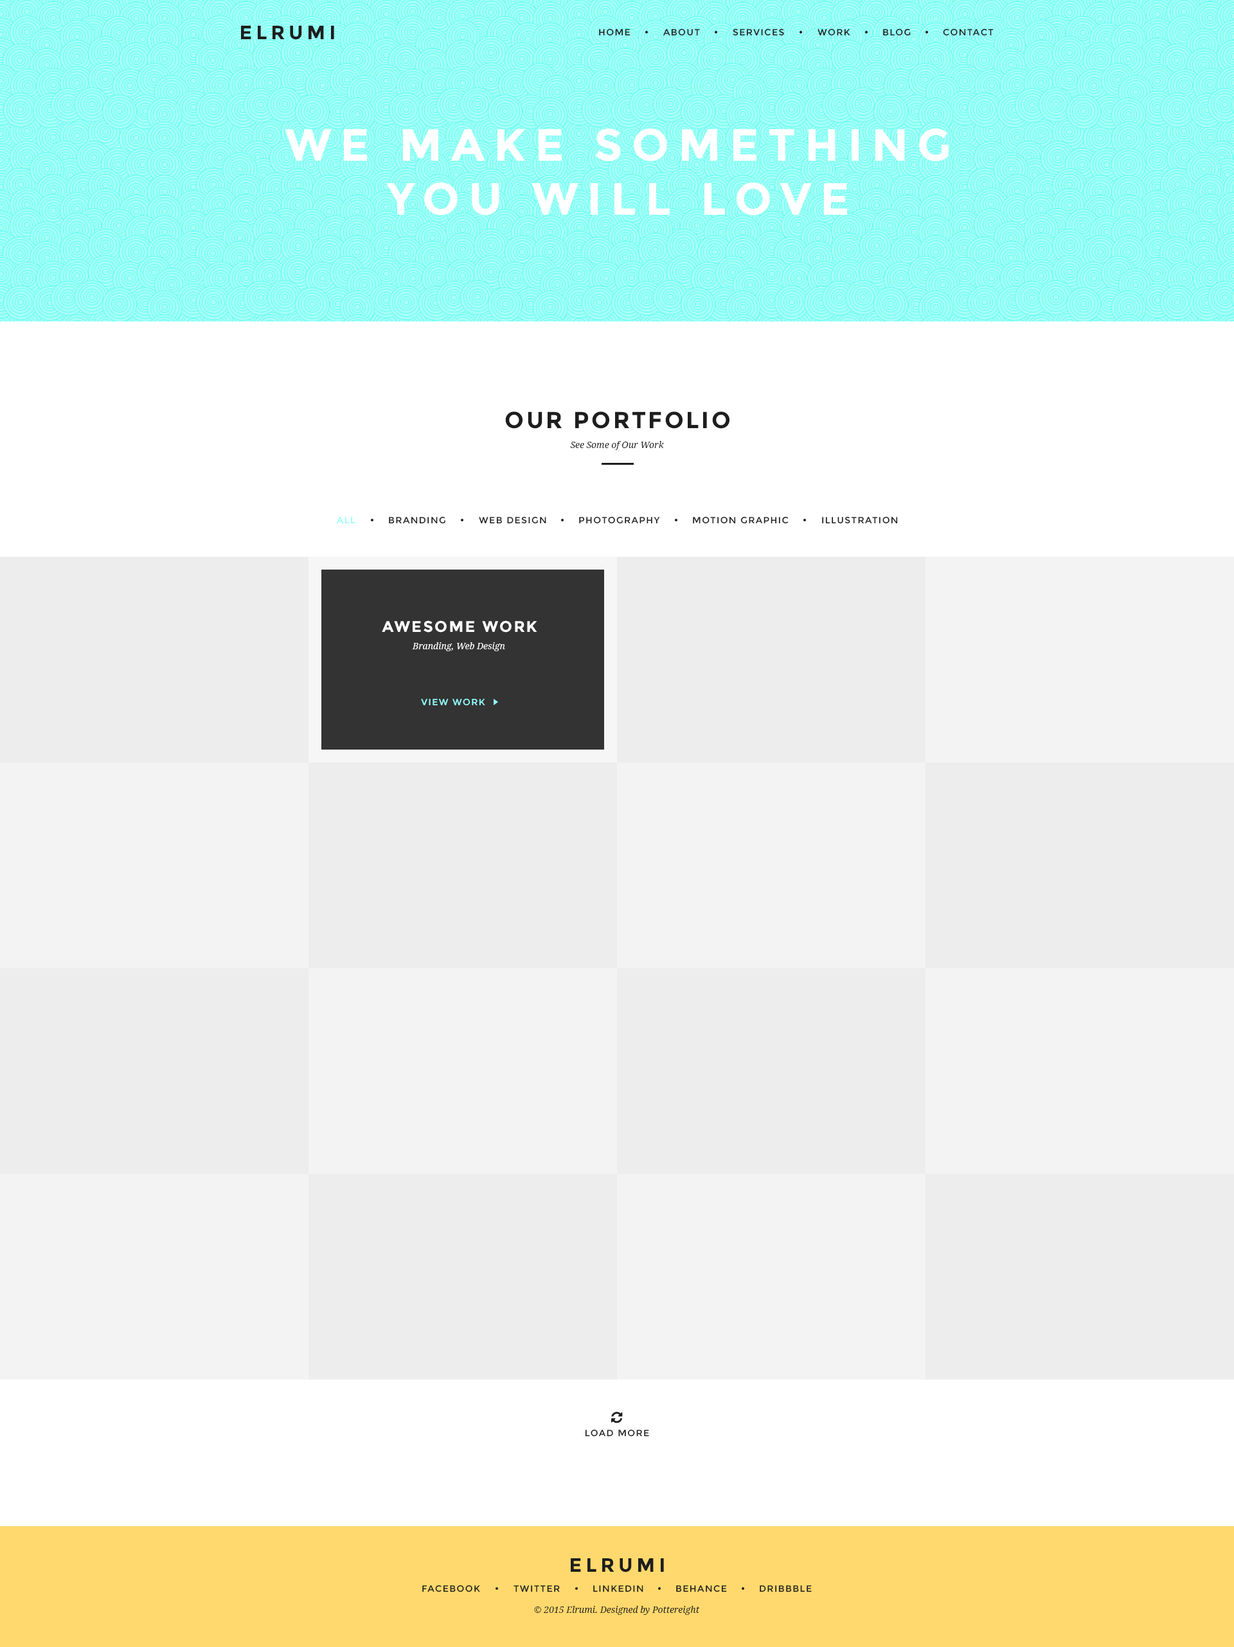
<style>
.page{position:relative;width:1234px;height:1647px;background:#ededed}
.page>*{position:absolute;margin:0}
.t1{font:19.3px "Montserrat-Bold";letter-spacing:0.2em;color:#1e1e1e}
.t2{font:9px "Montserrat-Regular";letter-spacing:0.1em;color:#1e1e1e}
.t3{font:45px "Montserrat-Bold";letter-spacing:0.2em;color:#ffffff}
.t4{font:23.1px "Montserrat-Bold";letter-spacing:0.1em;color:#1e1e1e}
.t5{font:9px "DroidSerif-Italic";color:#1e1e1e}
.t6{font:9px "Montserrat-Regular";letter-spacing:0.1em;color:#92fcf9}
.t7{font:15.4px "Montserrat-Bold";letter-spacing:0.1em;color:#ffffff}
.t8{font:9px "DroidSerif-Italic";color:#ffffff}
</style>
<div class="page">
<p class="t1" style="left:241px;top:26px;width:93px;height:14px">ELRUMI</p>
<p class="t2" style="left:599px;top:28px;width:32px;height:8px">HOME</p>
<p class="t2" style="left:663px;top:28px;width:37px;height:8px">ABOUT</p>
<p class="t2" style="left:733px;top:28px;width:51px;height:8px">SERVICES</p>
<p class="t2" style="left:818px;top:28px;width:33px;height:8px">WORK</p>
<p class="t2" style="left:883px;top:28px;width:28px;height:8px">BLOG</p>
<p class="t2" style="left:943px;top:28px;width:51px;height:8px">CONTACT</p>
<p class="t3" style="left:285px;top:129px;width:664px;height:86px;text-align:center">WE MAKE SOMETHING<br>YOU WILL LOVE</p>
<p class="t4" style="left:505px;top:411px;width:225px;height:18px">OUR PORTFOLIO</p>
<p class="t5" style="left:570px;top:441px;width:95px;height:9px">See Some of Our Work</p>
<p class="t6" style="left:337px;top:517px;width:19px;height:7px">ALL</p>
<p class="t2" style="left:389px;top:516px;width:57px;height:8px">BRANDING</p>
<p class="t2" style="left:479px;top:516px;width:67px;height:8px">WEB DESIGN</p>
<p class="t2" style="left:579px;top:516px;width:81px;height:8px">PHOTOGRAPHY</p>
<p class="t2" style="left:693px;top:516px;width:96px;height:8px">MOTION GRAPHIC</p>
<p class="t2" style="left:822px;top:516px;width:76px;height:8px">ILLUSTRATION</p>
<p class="t7" style="left:382px;top:620px;width:155px;height:13px">AWESOME WORK</p>
<p class="t8" style="left:412px;top:642px;width:93px;height:9px">Branding, Web Design</p>
<p class="t6" style="left:421px;top:698px;width:64px;height:8px">VIEW WORK</p>
<p class="t2" style="left:585px;top:1429px;width:64px;height:8px">LOAD MORE</p>
<p class="t1" style="left:571px;top:1558px;width:93px;height:14px">ELRUMI</p>
<p class="t2" style="left:422px;top:1585px;width:58px;height:7px">FACEBOOK</p>
<p class="t2" style="left:514px;top:1585px;width:46px;height:7px">TWITTER</p>
<p class="t2" style="left:593px;top:1585px;width:51px;height:7px">LINKEDIN</p>
<p class="t2" style="left:676px;top:1585px;width:51px;height:7px">BEHANCE</p>
<p class="t2" style="left:760px;top:1585px;width:52px;height:7px">DRIBBBLE</p>
<p class="t5" style="left:534px;top:1606px;width:165px;height:9px">© 2015 Elrumi. Designed by Pottereight</p>
</div>
